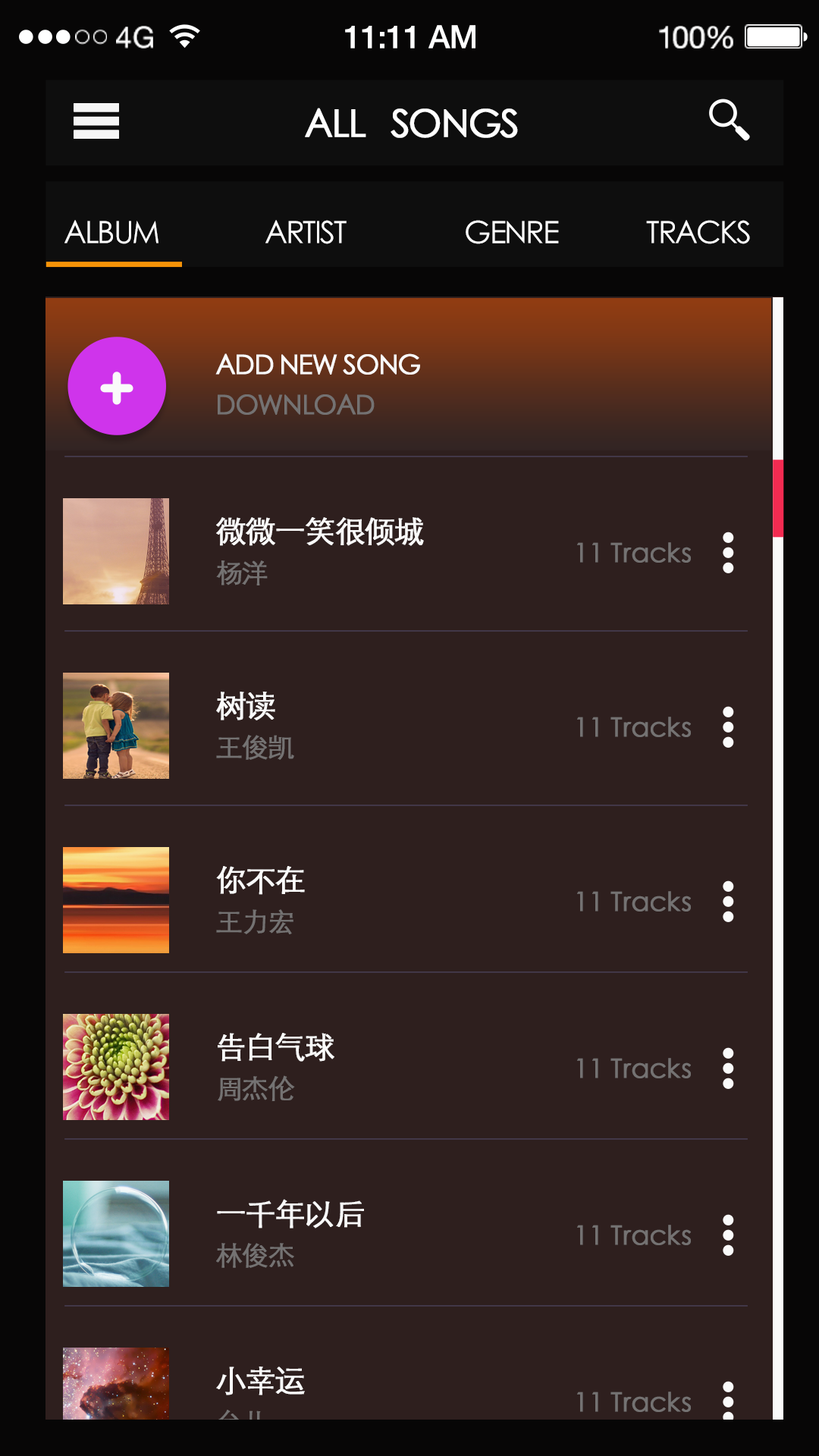
<style>
.page{position:relative;width:819px;height:1456px;background:#2e1f1e}
.page>*{position:absolute;margin:0}
.t1{font:29.4px "HelveticaNeue";letter-spacing:0.02em;color:#ffffff}
.t2{font:32px "HelveticaNeue-Medium";letter-spacing:-0.02em;color:#ffffff}
.t3{font:30.7px "HelveticaNeue";letter-spacing:-0.02em;color:#ffffff}
.t4{font:37.9px "STHeitiSC-Light";letter-spacing:-0.05em;color:#ffffff;text-transform:uppercase;font-weight:bold}
.t5{font:30.8px "STHeitiSC-Light";letter-spacing:-0.05em;color:#ffffff;text-transform:uppercase}
.t6{font:26.7px "STHeitiSC-Light";letter-spacing:-0.05em;color:#ffffff;text-transform:uppercase;font-weight:bold}
.t7{font:26.7px "STHeitiSC-Light";letter-spacing:-0.05em;color:#767474;text-transform:uppercase;font-weight:bold}
.t8{font:30.3px "STHeitiSC-Light";letter-spacing:-0.05em;color:#ffffff;text-transform:uppercase;font-weight:bold}
.t9{font:26.5px "STHeitiSC-Light";letter-spacing:-0.01em;color:#767474;font-weight:bold}
.t10{font:26.5px "STHeitiSC-Light";letter-spacing:-0.01em;color:#767474;text-transform:uppercase;font-weight:bold}
.t11{font:26.5px "STHeitiSC-Light";letter-spacing:-0.05em;color:#767474;text-transform:uppercase;font-weight:bold}
</style>
<div class="page">
<p class="t1" style="left:116px;top:26px;width:37px;height:23px">4G</p>
<p class="t2" style="left:345px;top:25px;width:130px;height:24px">11:11 AM</p>
<p class="t3" style="left:659px;top:26px;width:74px;height:23px">100%</p>
<p class="t4" style="left:305px;top:108px;width:213px;height:30px">All   Songs</p>
<p class="t5" style="left:64px;top:220px;width:94px;height:24px">Album</p>
<p class="t5" style="left:265px;top:220px;width:82px;height:24px">Artist</p>
<p class="t5" style="left:466px;top:220px;width:93px;height:24px">Genre</p>
<p class="t5" style="left:646px;top:220px;width:104px;height:24px">Tracks</p>
<p class="t6" style="left:215px;top:353px;width:205px;height:22px">Add New song</p>
<p class="t7" style="left:218px;top:394px;width:157px;height:21px">Download</p>
<p class="t8" style="left:216px;top:517px;width:208px;height:29px">微微一笑很倾城</p>
<p class="t9" style="left:577px;top:542px;width:114px;height:21px"><span class="t10">11 T</span>racks</p>
<p class="t11" style="left:216px;top:560px;width:52px;height:25px">杨洋</p>
<p class="t8" style="left:216px;top:692px;width:59px;height:28px">树读</p>
<p class="t9" style="left:577px;top:717px;width:114px;height:20px"><span class="t10">11 T</span>racks</p>
<p class="t11" style="left:216px;top:735px;width:78px;height:25px">王俊凯</p>
<p class="t8" style="left:216px;top:866px;width:89px;height:29px">你不在</p>
<p class="t9" style="left:577px;top:891px;width:114px;height:21px"><span class="t10">11 T</span>racks</p>
<p class="t11" style="left:216px;top:909px;width:77px;height:25px">王力宏</p>
<p class="t8" style="left:218px;top:1033px;width:116px;height:29px">告白气球</p>
<p class="t9" style="left:577px;top:1058px;width:114px;height:20px"><span class="t10">11 T</span>racks</p>
<p class="t11" style="left:218px;top:1075px;width:77px;height:26px">周杰伦</p>
<p class="t8" style="left:217px;top:1199px;width:147px;height:29px">一千年以后</p>
<p class="t9" style="left:577px;top:1225px;width:114px;height:20px"><span class="t10">11 T</span>racks</p>
<p class="t11" style="left:216px;top:1243px;width:78px;height:25px">林俊杰</p>
<p class="t8" style="left:216px;top:1366px;width:89px;height:29px">小幸运</p>
<p class="t9" style="left:577px;top:1392px;width:114px;height:20px"><span class="t10">11 T</span>racks</p>
</div>
